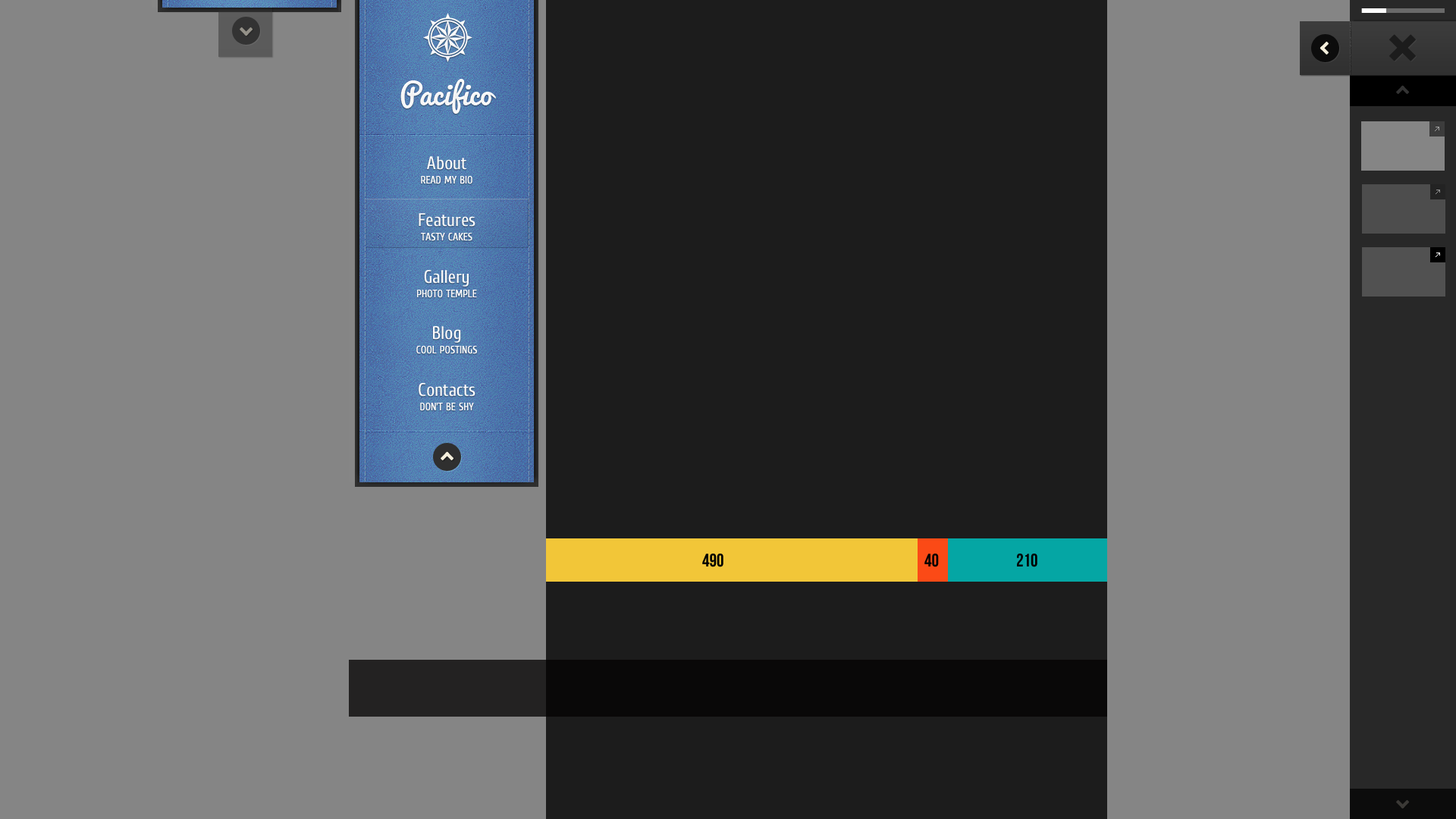
<style>
.page{position:relative;width:1456px;height:819px;background:#858585}
.page>*{position:absolute;margin:0}
.t1{font:28.8px "Pacifico";color:#f7f7f7}
.t2{font:18.2px "Cuprum";color:#fbfbfb}
.t3{font:10.6px "Cuprum";color:#fbfbfb;text-transform:uppercase}
.t4{font:18.2px "Cuprum";color:#fafafa}
</style>
<div class="page">
<p class="t1" style="left:400px;top:79px;width:96px;height:35px">Pacifico</p>
<p class="t2" style="left:427px;top:156px;width:39px;height:14px">About</p>
<p class="t3" style="left:421px;top:176px;width:51px;height:8px">read my bio</p>
<p class="t2" style="left:419px;top:213px;width:56px;height:14px">Features</p>
<p class="t3" style="left:421px;top:233px;width:51px;height:8px">tasty cakes</p>
<p class="t4" style="left:424px;top:270px;width:45px;height:17px">Gallery</p>
<p class="t3" style="left:417px;top:290px;width:60px;height:8px">photo temple</p>
<p class="t4" style="left:433px;top:326px;width:28px;height:17px">Blog</p>
<p class="t3" style="left:416px;top:346px;width:61px;height:8px">cool postings</p>
<p class="t2" style="left:419px;top:383px;width:56px;height:14px">Contacts</p>
<p class="t3" style="left:420px;top:403px;width:54px;height:8px">don’t be shy</p>
</div>
